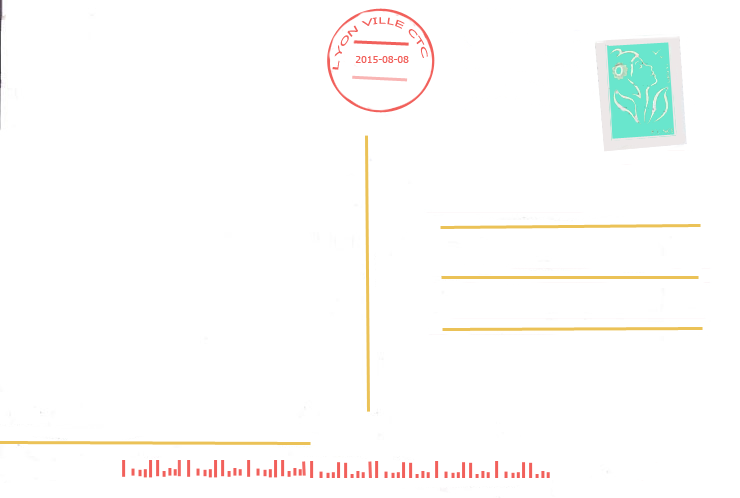
<style>
.page{position:relative;width:740px;height:498px;background:#ffffff}
.page>*{position:absolute;margin:0}
.t1{font:9.1px "Tahoma";letter-spacing:0.025em;color:#f1605b;scale:0.87 1}
.t2{font:10px "Tahoma";letter-spacing:0.025em;color:#f1605b}
</style>
<div class="page">
<p class="t1" style="left:332px;top:17px;width:96px;height:53px;rotate:5deg">LYON VILLE CTC</p>
<p class="t2" style="left:355px;top:56px;width:54px;height:7px">2015-08-08</p>
</div>
